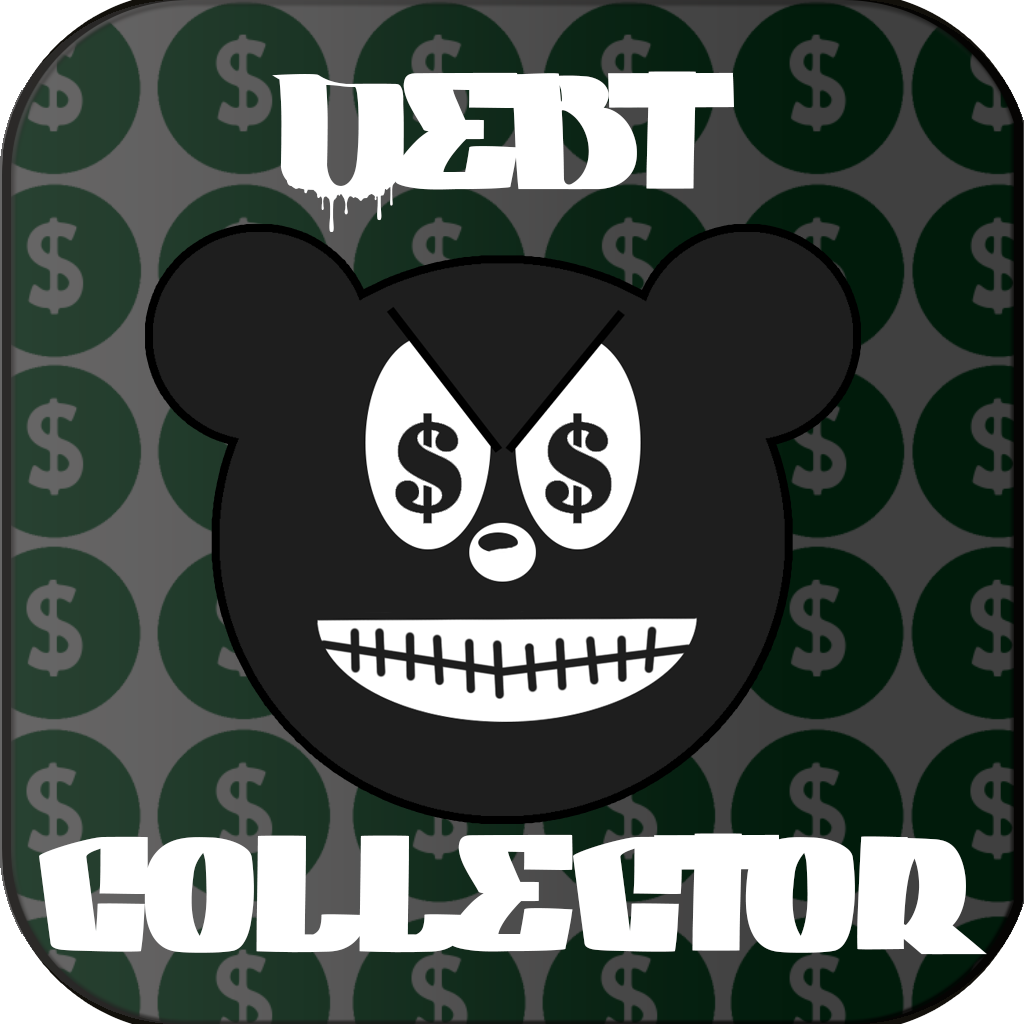
<style>
.page{position:relative;width:1024px;height:1024px;background:#1e1e1e}
.page>*{position:absolute;margin:0}
.t1{font:120px "GANGBANGCRIME";color:#ffffff}
</style>
<div class="page">
<p class="t1" style="left:272px;top:71px;width:462px;height:161px">Debt</p>
<p class="t1" style="left:39px;top:833px;width:948px;height:122px">collector</p>
</div>
